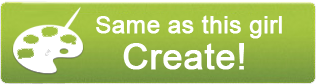
<style>
.page{position:relative;width:316px;height:84px}
.page>*{position:absolute;margin:0}
.t1{font:24px "ArialMT";color:#ffffff;font-weight:bold}
.t2{font:36px "ArialMT";color:#ffffff;font-weight:bold}
</style>
<div class="page">
<p class="t1" style="left:96px;top:15px;width:186px;height:24px">Same as this girl</p>
<p class="t2" style="left:123px;top:43px;width:121px;height:27px">Create!</p>
</div>
